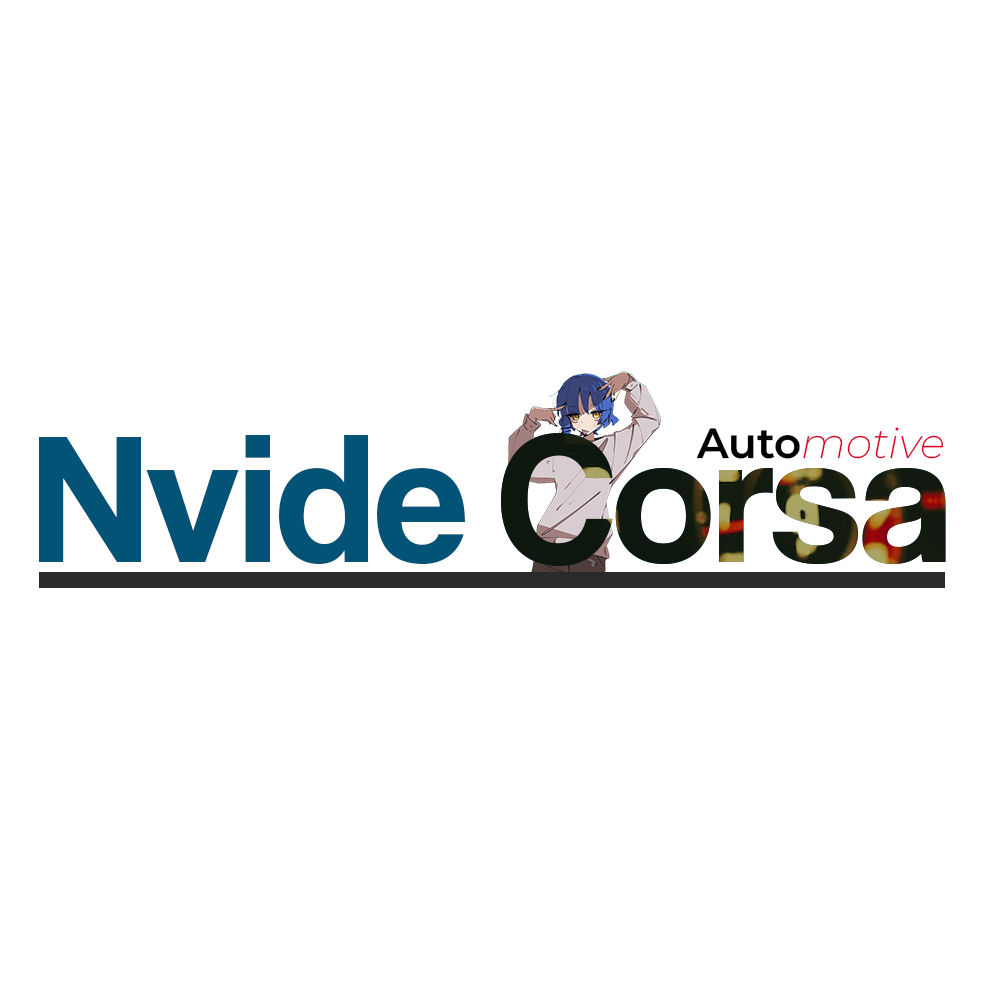
<style>
.page{position:relative;width:1000px;height:1000px;background:#ffffff}
.page>*{position:absolute;margin:0}
.t1{font:187.9px "CoolveticaRg-Regular";color:#025375}
.t2{font:187.9px "CoolveticaRg-Regular";color:#12190f}
.t3{font:42.1px "MontserratThin-ExtraLightItalic";color:#d70028}
.t4{font:42.1px "MontserratThin-SemiBold";color:#000000}
</style>
<div class="page">
<p class="t1" style="left:39px;top:435px;width:426px;height:130px">Nvide</p>
<p class="t2" style="left:501px;top:433px;width:445px;height:133px">Corsa</p>
<p class="t3" style="left:696px;top:427px;width:247px;height:32px"><span class="t4">Auto</span>motive</p>
</div>
